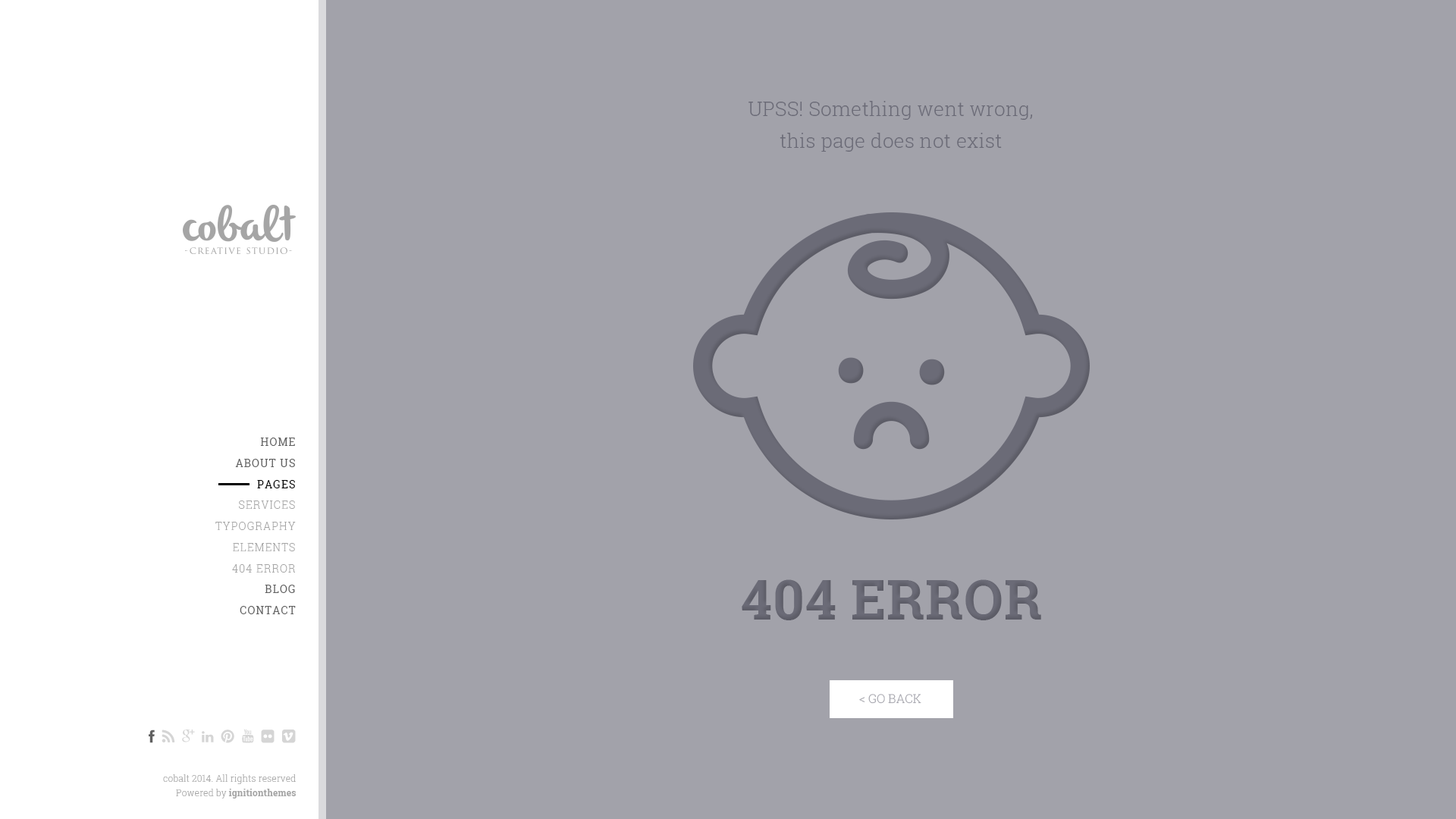
<style>
.page{position:relative;width:1456px;height:819px;background:#a2a2aa}
.page>*{position:absolute;margin:0}
.t1{font:19.7px/31.8px "RobotoSlab-Light";letter-spacing:0.01em;color:#6b6b77}
.t2{font:10.6px/21.2px "RobotoSlab-Regular";letter-spacing:0.08em;color:#606060}
.t3{font:10.6px/21.2px "RobotoSlab-Regular";letter-spacing:0.08em;color:#000000}
.t4{font:10.6px/21.2px "RobotoSlab-Light";letter-spacing:0.08em;color:#a5a5a5}
.t5{font:55.4px "RobotoSlab-Bold";letter-spacing:0.01em;color:#6b6b77}
.t6{font:12.1px "RobotoSlab-Light";color:#a2a2aa}
.t7{font:9.1px/14.4px "RobotoSlab-Light";letter-spacing:0.01em;color:#a5a5a5}
.t8{font:9.1px/14.4px "RobotoSlab-Bold";letter-spacing:0.01em;color:#a5a5a5}
</style>
<div class="page">
<p class="t1" style="left:748px;top:101px;width:285px;height:51px;text-align:center">UPSS! Something went wrong,<br>this page does not exist</p>
<p class="t2" style="left:235px;top:438px;width:60px;height:50px;text-align:right">HOME<br>ABOUT US<br><span class="t3">PAGES</span></p>
<p class="t4" style="left:215px;top:500px;width:81px;height:73px;text-align:right">SERVICES<br>TYPOGRAPHY<br>ELEMENTS<br>404 ERROR</p>
<p class="t5" style="left:742px;top:579px;width:299px;height:41px">404 ERROR</p>
<p class="t2" style="left:240px;top:585px;width:56px;height:29px;text-align:right">BLOG<br>CONTACT</p>
<p class="t6" style="left:859px;top:694px;width:62px;height:10px">&lt; GO BACK</p>
<p class="t7" style="left:163px;top:774px;width:133px;height:25px;text-align:right">cobalt 2014. All rights reserved<br>Powered by <span class="t8">ignitionthemes</span></p>
</div>
